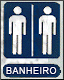
<style>
.page{position:relative;width:64px;height:80px}
.page>*{position:absolute;margin:0}
.t1{font:9.3px "ArialMT";letter-spacing:0.02em;color:#ffffff}
</style>
<div class="page">
<p class="t1" style="left:6px;top:67px;width:51px;height:7px">BANHEIRO</p>
</div>
